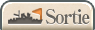
<style>
.page{position:relative;width:95px;height:30px}
.page>*{position:absolute;margin:0}
.t1{font:20px "RyuminPro-ExBold";letter-spacing:-0.08em;color:#6d6963;scale:0.9 1}
</style>
<div class="page">
<p class="t1" style="left:45px;top:9px;width:45px;height:15px">Sortie</p>
</div>
